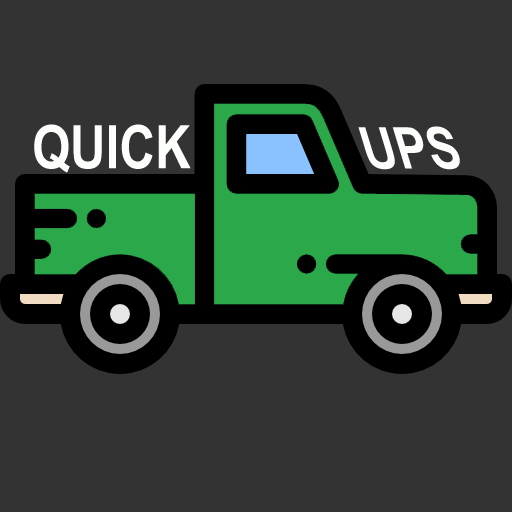
<style>
.page{position:relative;width:512px;height:512px;background:#333333}
.page>*{position:absolute;margin:0}
.t1{font:60px "ArialNarrow-Bold";color:#fcfffc}
.t2{font:60px "ArialNarrow-Bold";color:#fcfffc;scale:0.96 1}
</style>
<div class="page">
<p class="t1" style="left:34px;top:124px;width:157px;height:49px">QUICK</p>
<p class="t2" style="left:358px;top:126px;width:102px;height:44px">UPS</p>
</div>
